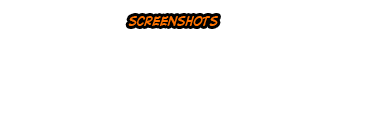
<style>
.page{position:relative;width:383px;height:118px;background:#ffffff}
.page>*{position:absolute;margin:0}
.t1{font:10px "DigitalStripBold";color:#ff7200}
</style>
<div class="page">
<p class="t1" style="left:128px;top:16px;width:90px;height:10px">Screenshots</p>
</div>
